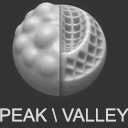
<style>
.page{position:relative;width:128px;height:128px;background:#333333}
.page>*{position:absolute;margin:0}
.t1{font:18px "ArialMT";color:#dadada}
</style>
<div class="page">
<p class="t1" style="left:0px;top:108px;width:129px;height:14px">PEAK \ VALLEY</p>
</div>
